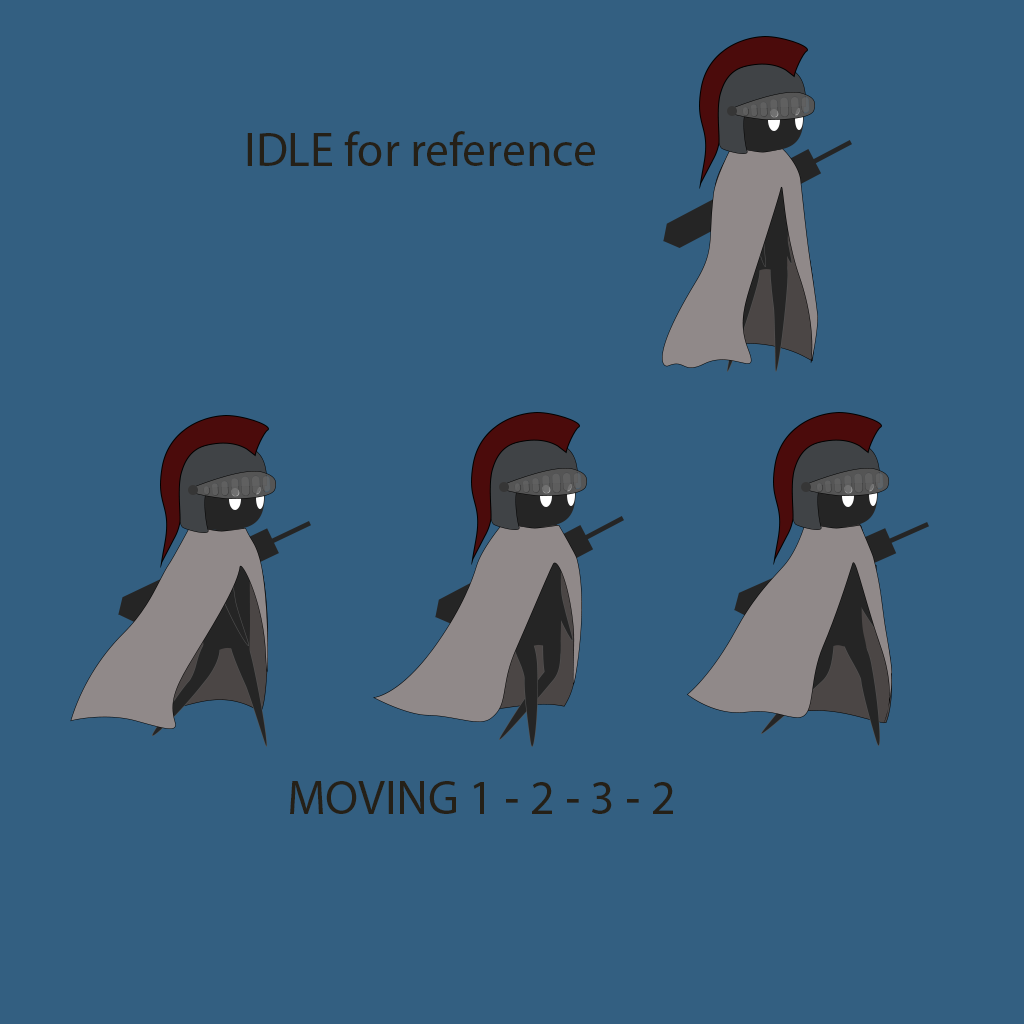
<style>
.page{position:relative;width:1024px;height:1024px;background:#335f81}
.page>*{position:absolute;margin:0}
.t1{font:48px "MyriadHebrew-Regular";color:#252017}
</style>
<div class="page">
<p class="t1" style="left:247px;top:131px;width:348px;height:35px">IDLE for reference</p>
<p class="t1" style="left:290px;top:781px;width:383px;height:33px">MOVING 1 - 2 - 3 - 2</p>
</div>
